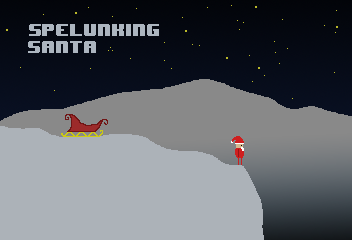
<style>
.page{position:relative;width:352px;height:240px;background:#acb2b8}
.page>*{position:absolute;margin:0}
.t1{font:14px "8BITWONDERNominal";color:#acb5bf}
</style>
<div class="page">
<p class="t1" style="left:28px;top:24px;width:131px;height:29px">Spelunking<br>santa</p>
</div>
